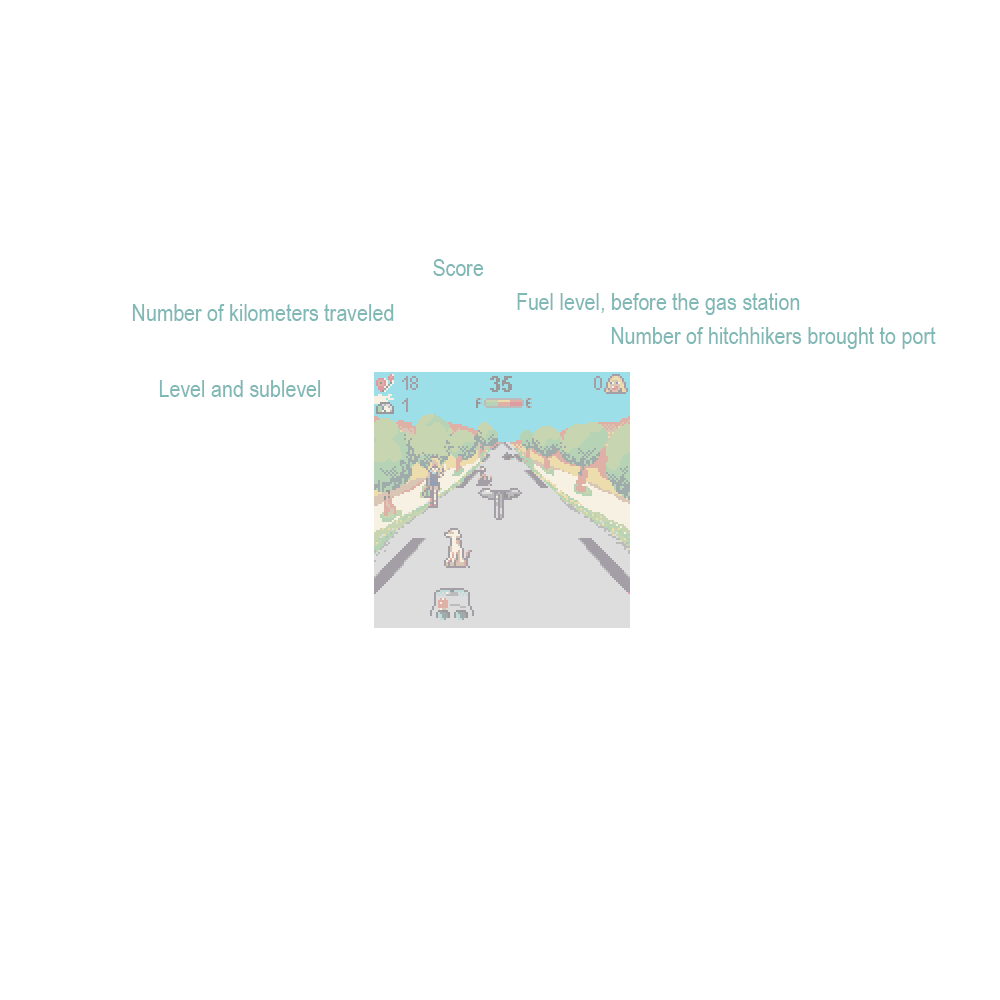
<style>
.page{position:relative;width:1000px;height:1000px;background:#ffffff}
.page>*{position:absolute;margin:0}
.t1{font:24px "ArialNarrow";color:#7fb8b5}
</style>
<div class="page">
<p class="t1" style="left:433px;top:259px;width:51px;height:17px">Score</p>
<p class="t1" style="left:517px;top:293px;width:283px;height:22px">Fuel level, before the gas station</p>
<p class="t1" style="left:132px;top:304px;width:262px;height:17px">Number of kilometers traveled</p>
<p class="t1" style="left:611px;top:327px;width:325px;height:22px">Number of hitchhikers brought to port</p>
<p class="t1" style="left:159px;top:380px;width:162px;height:17px">Level and sublevel</p>
</div>
